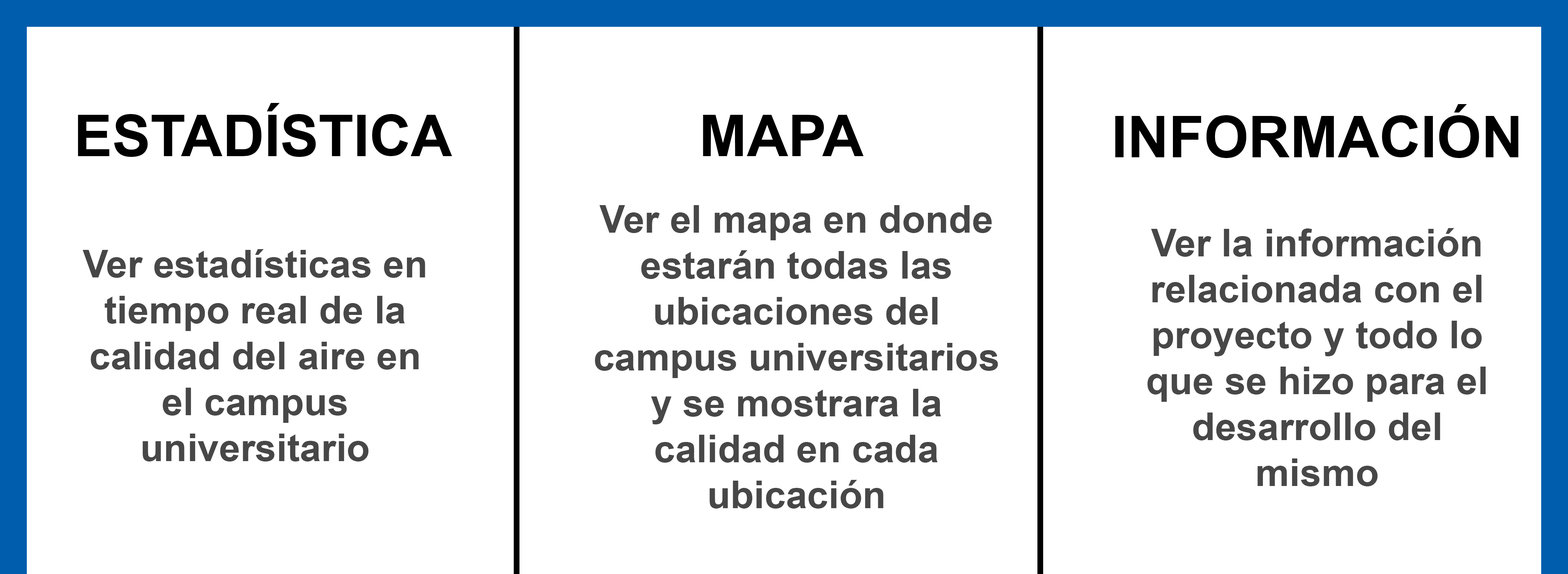
<style>
.page{position:relative;width:1568px;height:574px;background:#ffffff}
.page>*{position:absolute;margin:0}
.t1{font:57.4px "Arial-BoldMT";color:#000000}
.t2{font:38.3px "Arial-BoldMT";color:#474747}
</style>
<div class="page">
<p class="t1" style="left:78px;top:103px;width:374px;height:54px">ESTADÍSTICA</p>
<p class="t1" style="left:1115px;top:104px;width:404px;height:54px">INFORMACIÓN</p>
<p class="t1" style="left:703px;top:115px;width:161px;height:41px">MAPA</p>
<p class="t2" style="left:595px;top:205px;width:403px;height:304px;text-align:center">Ver el mapa en donde estarán todas las<br>ubicaciones del campus universitarios y se mostrara la<br>calidad en cada<br>ubicación</p>
<p class="t2" style="left:1147px;top:228px;width:339px;height:259px;text-align:center">Ver la información<br>relacionada con el<br>proyecto y todo lo que se hizo para el desarrollo del mismo</p>
<p class="t2" style="left:83px;top:249px;width:342px;height:213px;text-align:center">Ver estadísticas en tiempo real de la <br>calidad del aire en el campus <br>universitario</p>
</div>
